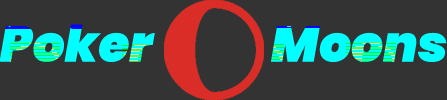
<style>
.page{position:relative;width:447px;height:100px;background:#333333}
.page>*{position:absolute;margin:0}
.t1{font:50px "Poppins-BlackItalic";color:#00ffff}
</style>
<div class="page">
<p class="t1" style="left:0px;top:24px;width:447px;height:38px">Poker              Moons</p>
</div>
